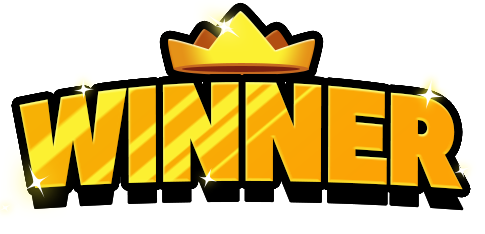
<style>
.page{position:relative;width:485px;height:234px;background:#ffffff}
.page>*{position:absolute;margin:0}
.t1{font:119.8px "PeaceSans";letter-spacing:-0.05em;color:#fbad05;scale:0.87 1}
</style>
<div class="page">
<p class="t1" style="left:19px;top:82px;width:444px;height:108px">WINNER</p>
</div>
